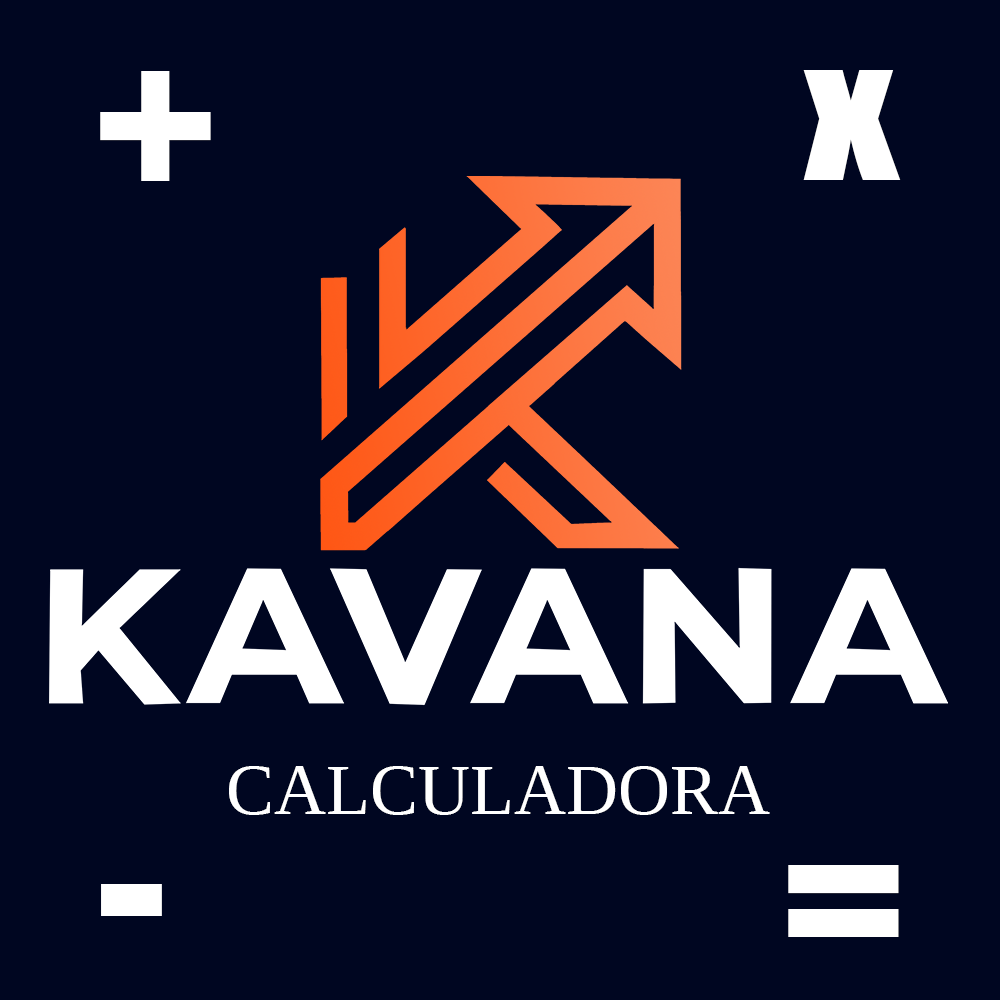
<style>
.page{position:relative;width:1000px;height:1000px;background:#000621}
.page>*{position:absolute;margin:0}
.t1{font:234.1px "Impact";color:#ffffff}
.t2{font:138.7px "Impact";color:#ffffff;scale:1.4 1}
.t3{font:72px "LiberationSerif";color:#ffffff}
</style>
<div class="page">
<p class="t1" style="left:100px;top:71px;width:111px;height:110px">+</p>
<p class="t2" style="left:803px;top:70px;width:98px;height:110px">X</p>
<p class="t3" style="left:229px;top:766px;width:541px;height:49px">CALCULADORA</p>
<p class="t1" style="left:788px;top:865px;width:111px;height:72px">=</p>
<p class="t1" style="left:101px;top:884px;width:61px;height:32px">-</p>
</div>
